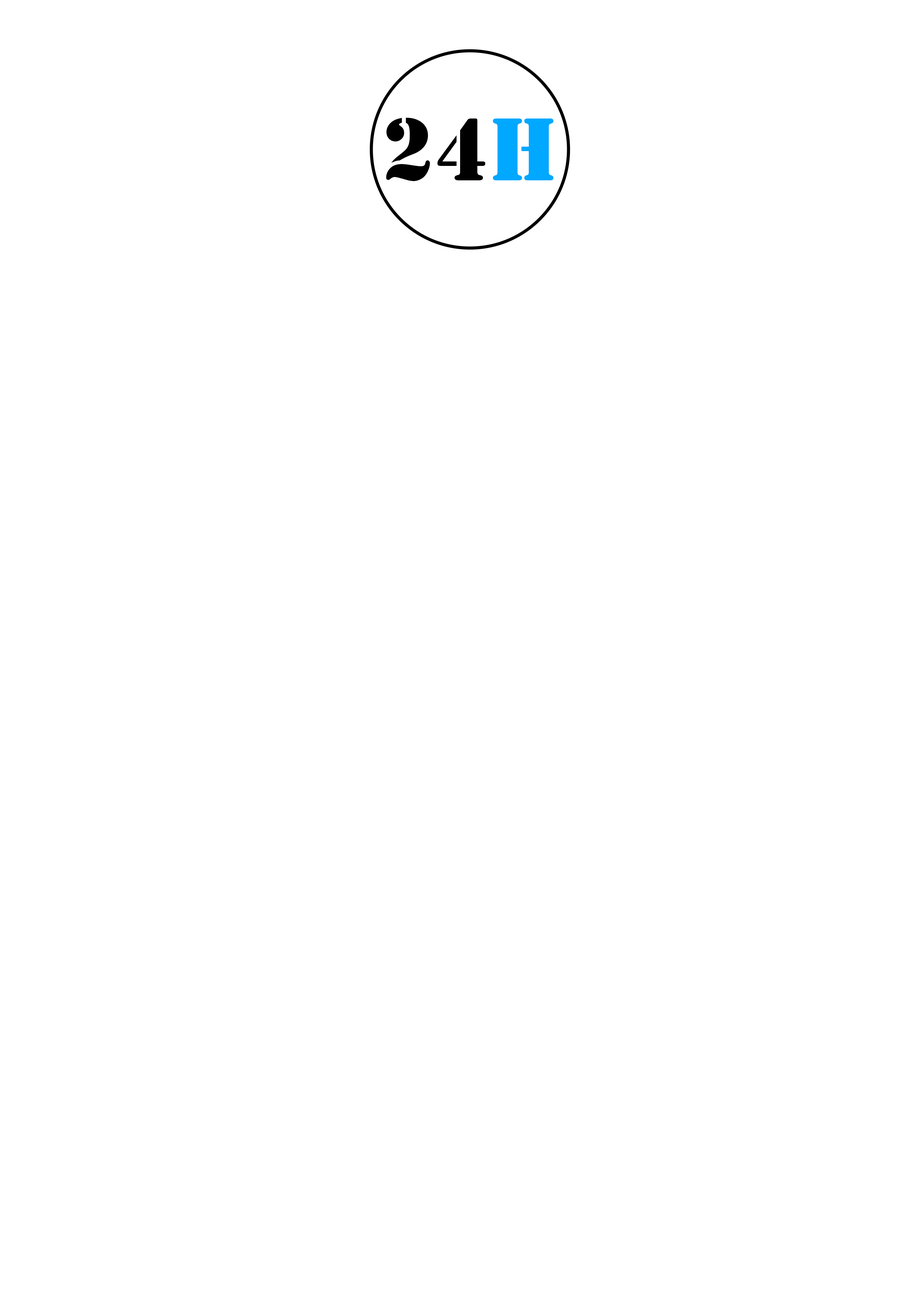
<style>
.page{position:relative;width:918px;height:1299px;background:#ffffff}
.page>*{position:absolute;margin:0}
.t1{font:92.6px "Stencil";color:#000000}
.t2{font:92.6px "Stencil";color:#00a8ff}
</style>
<div class="page">
<p class="t1" style="left:386px;top:117px;width:168px;height:64px">24<span class="t2">h</span></p>
</div>
